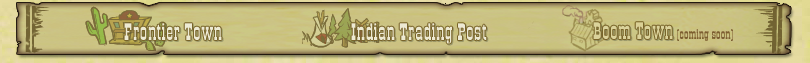
<style>
.page{position:relative;width:810px;height:63px}
.page>*{position:absolute;margin:0}
.t1{font:25px "OldTown";letter-spacing:0.01em;color:#edead4}
.t2{font:25px "OldTown";letter-spacing:0.01em;color:#edead3}
.t3{font:25px "OldTown";letter-spacing:0.01em;color:#e2d9a7}
.t4{font:14.6px "OldTown";letter-spacing:0.01em;color:#7c5f31}
</style>
<div class="page">
<p class="t1" style="left:124px;top:23px;width:98px;height:17px">Frontier Town</p>
<p class="t2" style="left:351px;top:23px;width:136px;height:21px">Indian Trading Post</p>
<p class="t3" style="left:593px;top:22px;width:80px;height:17px">Boom Town</p>
<p class="t4" style="left:677px;top:29px;width:56px;height:12px">(coming soon)</p>
</div>
